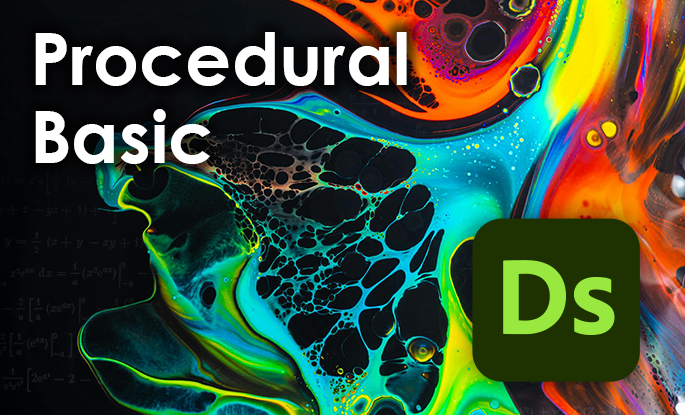
<style>
.page{position:relative;width:685px;height:415px}
.page>*{position:absolute;margin:0}
.t1{font:72.2px/77.9px "CenturyGothic-Bold";color:#ffffff}
</style>
<div class="page">
<p class="t1" style="left:35px;top:32px;width:372px;height:132px">Procedural<br>Basic</p>
</div>
